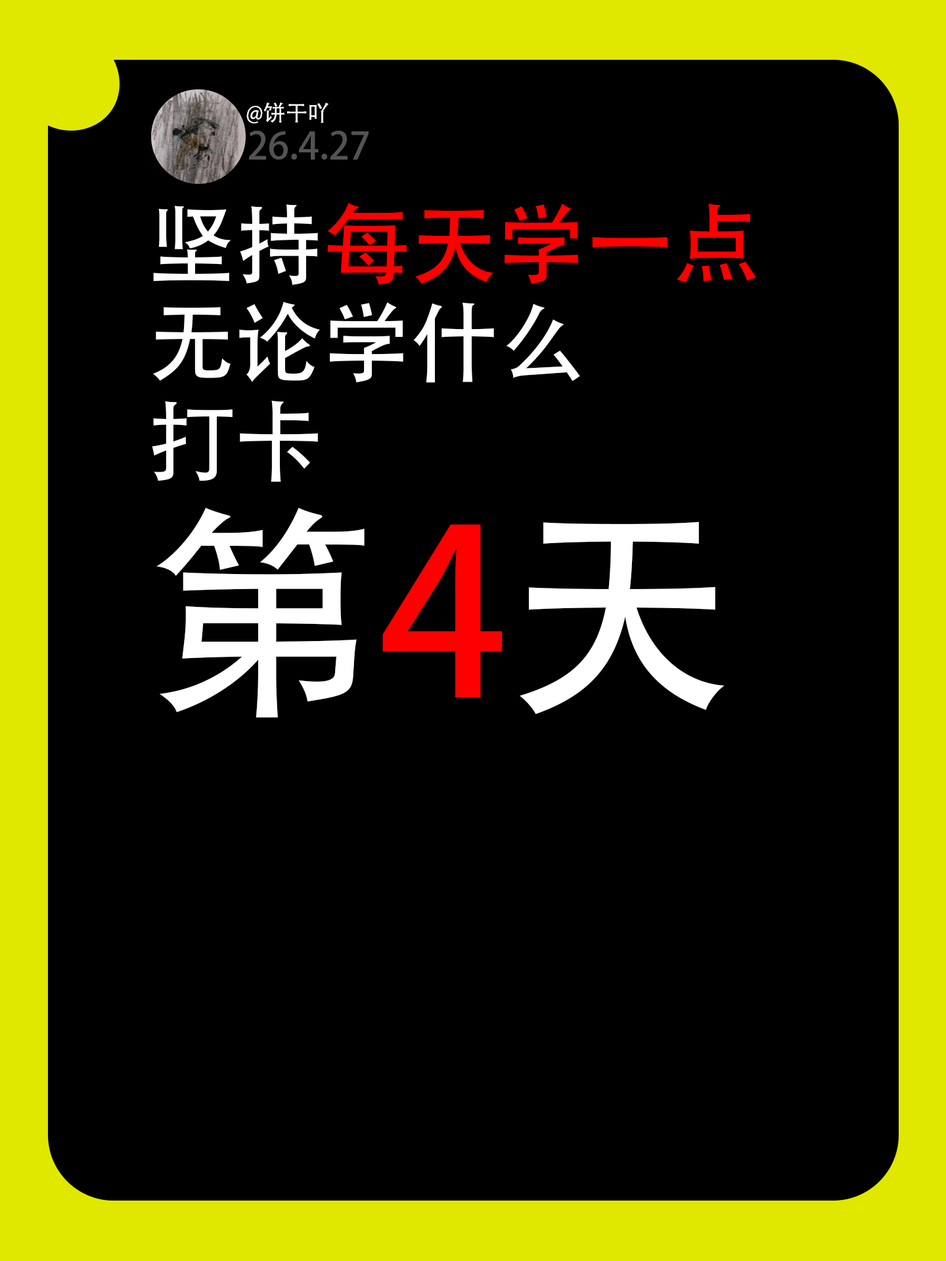
<style>
.page{position:relative;width:946px;height:1261px;background:#000000}
.page>*{position:absolute;margin:0}
.t1{font:21.9px "AdobeHeitiStd-Regular";color:#ffffff}
.t2{font:37.4px "AdobeHeitiStd-Regular";color:#535353}
.t3{font:87.6px/98.5px "AdobeHeitiStd-Regular";color:#ffffff}
.t4{font:87.6px/98.5px "AdobeHeitiStd-Regular";color:#ff0000}
.t5{font:229.9px/98.5px "AdobeHeitiStd-Regular";color:#ffffff}
.t6{font:229.9px/98.5px "AdobeHeitiStd-Regular";color:#ff0000}
</style>
<div class="page">
<p class="t1" style="left:246px;top:102px;width:82px;height:21px">@饼干吖</p>
<p class="t2" style="left:249px;top:131px;width:119px;height:29px">26.4.27</p>
<p class="t3" style="left:152px;top:202px;width:604px;height:516px">坚持<span class="t4">每天学一点</span>无论学什么<br>打卡<br><span class="t5">第</span><span class="t6">4</span><span class="t5">天</span></p>
</div>
